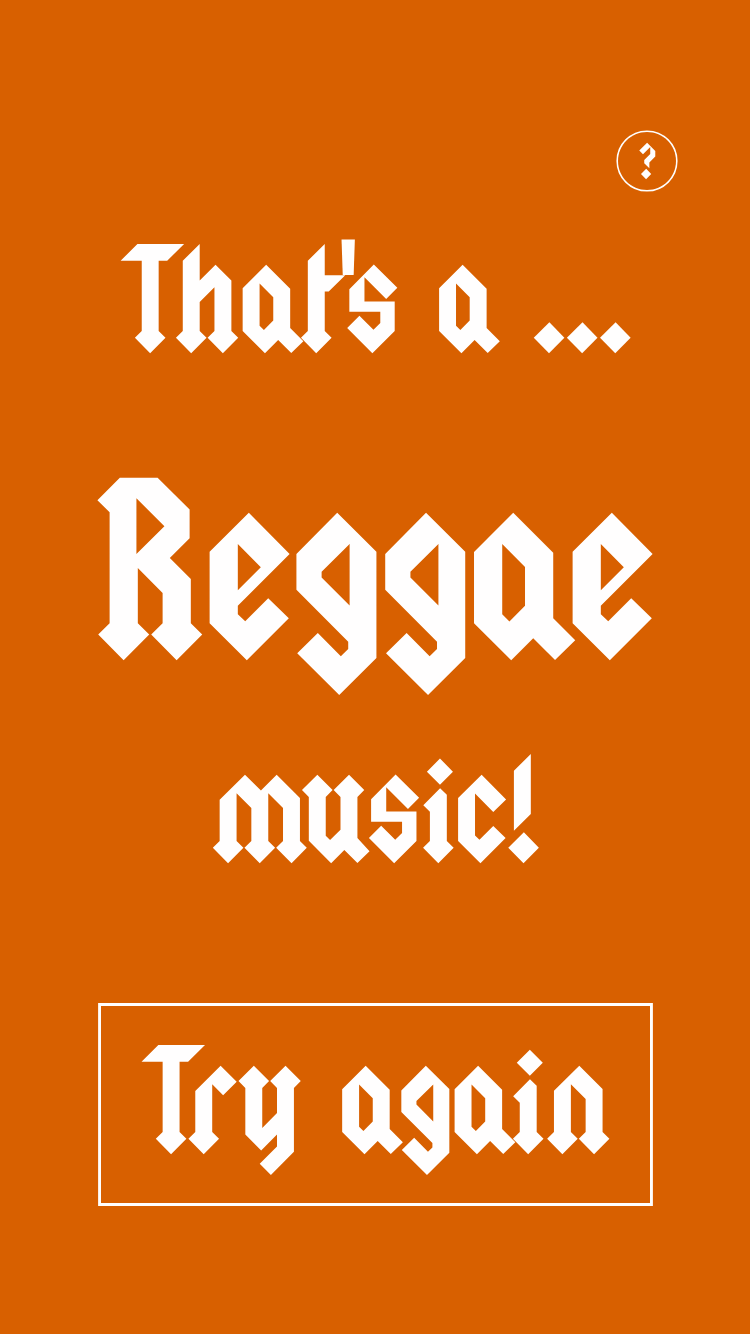
<style>
.page{position:relative;width:750px;height:1334px;background:#d86000}
.page>*{position:absolute;margin:0}
.t1{font:40px "Squealer";color:#fffefe}
.t2{font:120px "Squealer";color:#fffefe}
.t3{font:200px "Squealer";color:#fffefe}
</style>
<div class="page">
<p class="t1" style="left:639px;top:142px;width:17px;height:38px">?</p>
<p class="t2" style="left:120px;top:239px;width:511px;height:115px">That's a ...</p>
<p class="t3" style="left:97px;top:477px;width:556px;height:218px">Reggae</p>
<p class="t2" style="left:212px;top:753px;width:327px;height:111px">music!</p>
<p class="t2" style="left:141px;top:1044px;width:469px;height:132px">Try again</p>
</div>
